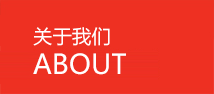
<style>
.page{position:relative;width:214px;height:94px;background:#ee3022}
.page>*{position:absolute;margin:0}
.t1{font:19px "MicrosoftYaHei";letter-spacing:0.01em;color:#ffffff}
.t2{font:27px "MicrosoftYaHei";letter-spacing:0.01em;color:#ffffff}
</style>
<div class="page">
<p class="t1" style="left:33px;top:27px;width:77px;height:19px">关于我们</p>
<p class="t2" style="left:33px;top:53px;width:93px;height:22px">ABOUT</p>
</div>
